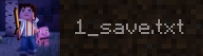
<style>
.page{position:relative;width:203px;height:56px}
.page>*{position:absolute;margin:0}
.t1{font:17px "Minecraft";color:#8a8684}
</style>
<div class="page">
<p class="t1" style="left:75px;top:19px;width:109px;height:18px">1_save.txt</p>
</div>
